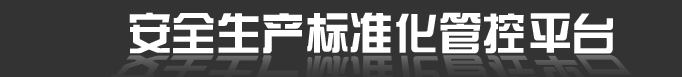
<style>
.page{position:relative;width:682px;height:77px;background:#333333}
.page>*{position:absolute;margin:0}
.t1{font:44.9px "JZhongYi";color:#ffffff}
</style>
<div class="page">
<p class="t1" style="left:129px;top:12px;width:484px;height:42px">安全生产标准化管控平台</p>
</div>
